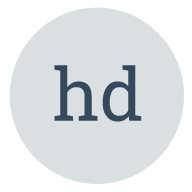
<style>
.page{position:relative;width:192px;height:192px;background:#dadfe1}
.page>*{position:absolute;margin:0}
.t1{font:125px "RobotoSlab-Regular";color:#34495e}
</style>
<div class="page">
<p class="t1" style="left:54px;top:65px;width:88px;height:57px">hd</p>
</div>
